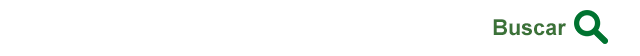
<style>
.page{position:relative;width:640px;height:56px;background:#ffffff}
.page>*{position:absolute;margin:0}
.t1{font:21.7px "Arial-BoldMT";color:#3b7238}
</style>
<div class="page">
<p class="t1" style="left:493px;top:19px;width:73px;height:17px">Buscar</p>
</div>
